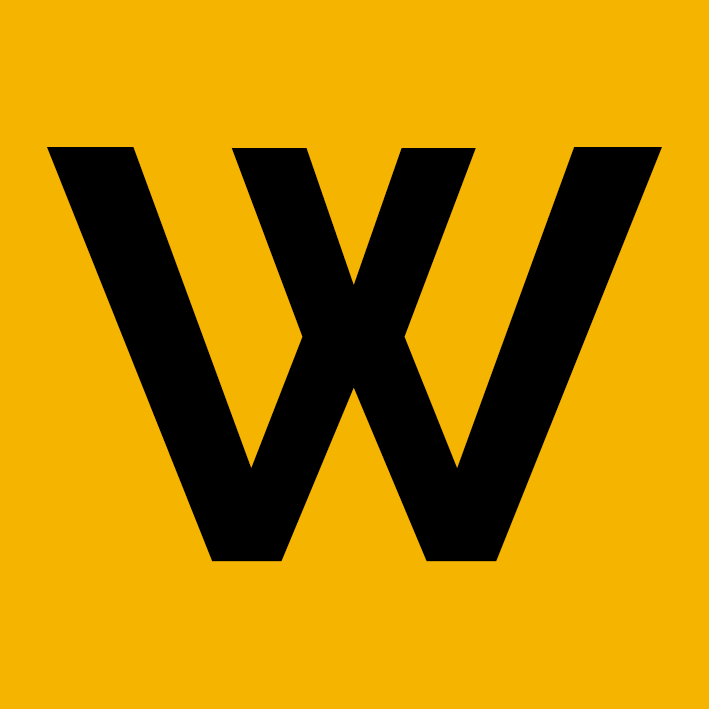
<style>
.page{position:relative;width:709px;height:709px;background:#f4b400}
.page>*{position:absolute;margin:0}
.t1{font:583.3px "Rawline-Bold";color:#000000}
</style>
<div class="page">
<p class="t1" style="left:47px;top:147px;width:615px;height:415px">W</p>
</div>
